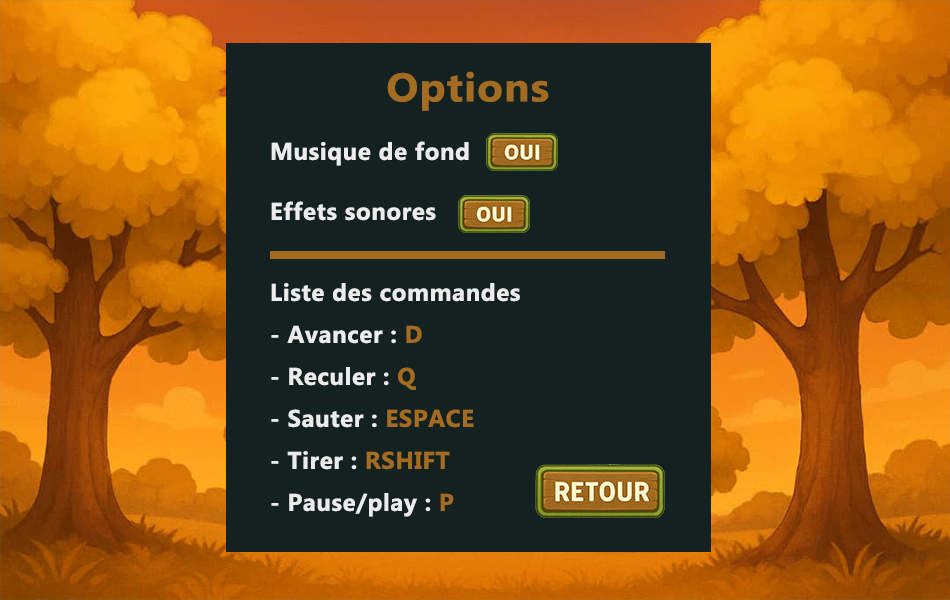
<style>
.page{position:relative;width:950px;height:600px;background:#142121}
.page>*{position:absolute;margin:0}
.t1{font:40px "Gadugi-Bold";letter-spacing:0.025em;color:#a46c22;scale:1.06 1}
.t2{font:24px "Gadugi-Bold";letter-spacing:0.025em;color:#ececec}
.t3{font:24px "Gadugi-Bold";letter-spacing:0.025em;color:#a46c22}
</style>
<div class="page">
<p class="t1" style="left:387px;top:71px;width:162px;height:40px">Options</p>
<p class="t2" style="left:271px;top:141px;width:198px;height:25px">Musique de fond</p>
<p class="t2" style="left:271px;top:201px;width:165px;height:20px">Effets sonores</p>
<p class="t2" style="left:271px;top:283px;width:249px;height:234px">Liste des commandes<br>- Avancer : <span class="t3">D<br></span>- Reculer : <span class="t3">Q<br></span>- Sauter : <span class="t3">ESPACE<br></span>- Tirer : <span class="t3">RSHIFT<br></span>- Pause/play :<span class="t3"> P</span></p>
</div>
